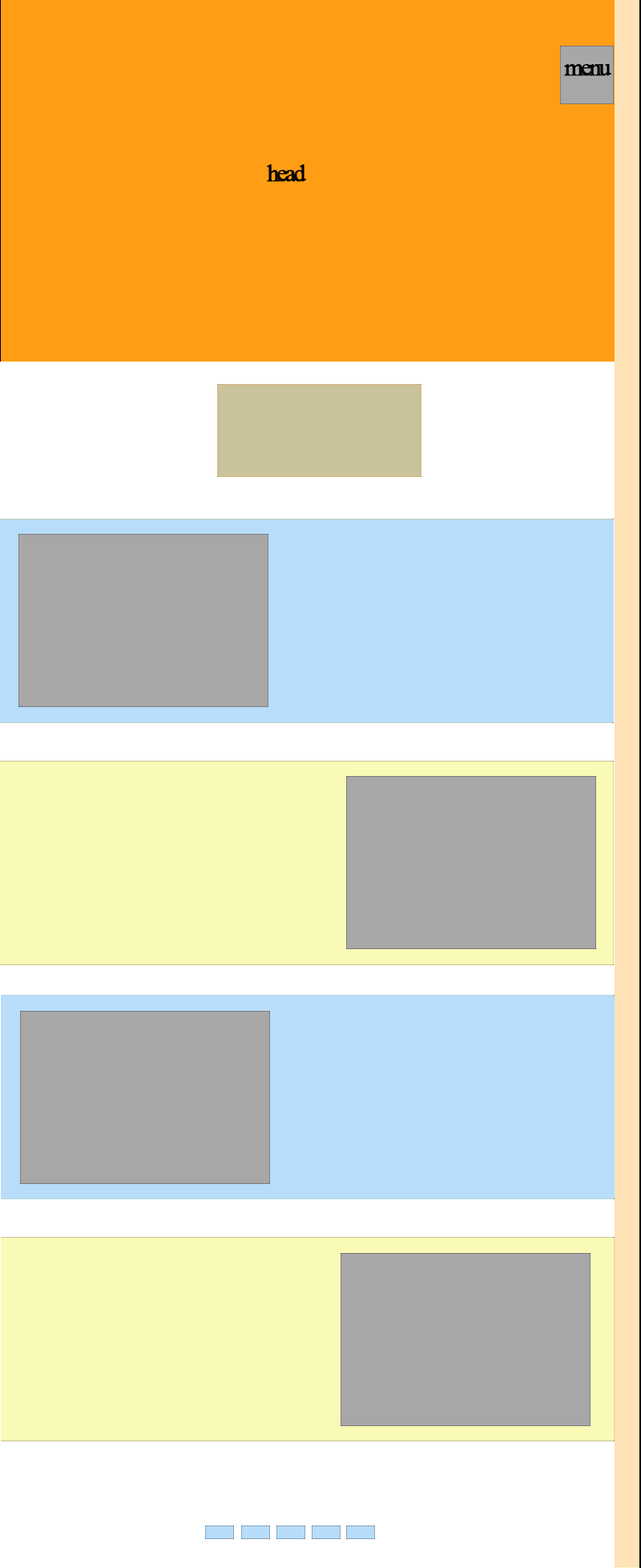
<style>
.page{position:relative;width:641px;height:1568px;background:#ff9e14}
.page>*{position:absolute;margin:0}
.t1{font:24px "TimesNewRomanPSMT";letter-spacing:-0.125em;color:#000000;font-weight:bold}
</style>
<div class="page">
<p class="t1" style="left:564px;top:64px;width:48px;height:12px">menu</p>
<p class="t1" style="left:267px;top:164px;width:39px;height:18px">head</p>
</div>
